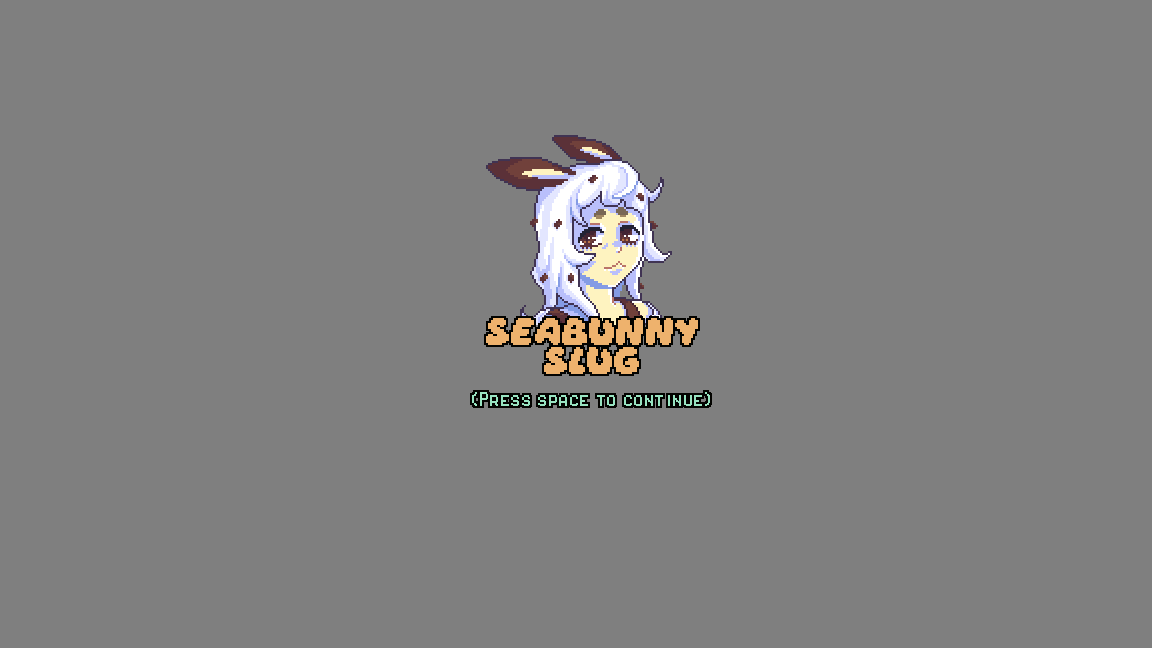
<style>
.page{position:relative;width:1152px;height:648px;background:#7f7f7f}
.page>*{position:absolute;margin:0}
.t1{font:24px "DaydreamRegular";color:#eeb26d}
.t2{font:24px "PixelOperatorSC";color:#98e4c1}
</style>
<div class="page">
<p class="t1" style="left:486px;top:318px;width:212px;height:56px;text-align:center">Seabunny<br>slug</p>
<p class="t2" style="left:472px;top:392px;width:238px;height:14px">(Press space to continue)</p>
</div>
